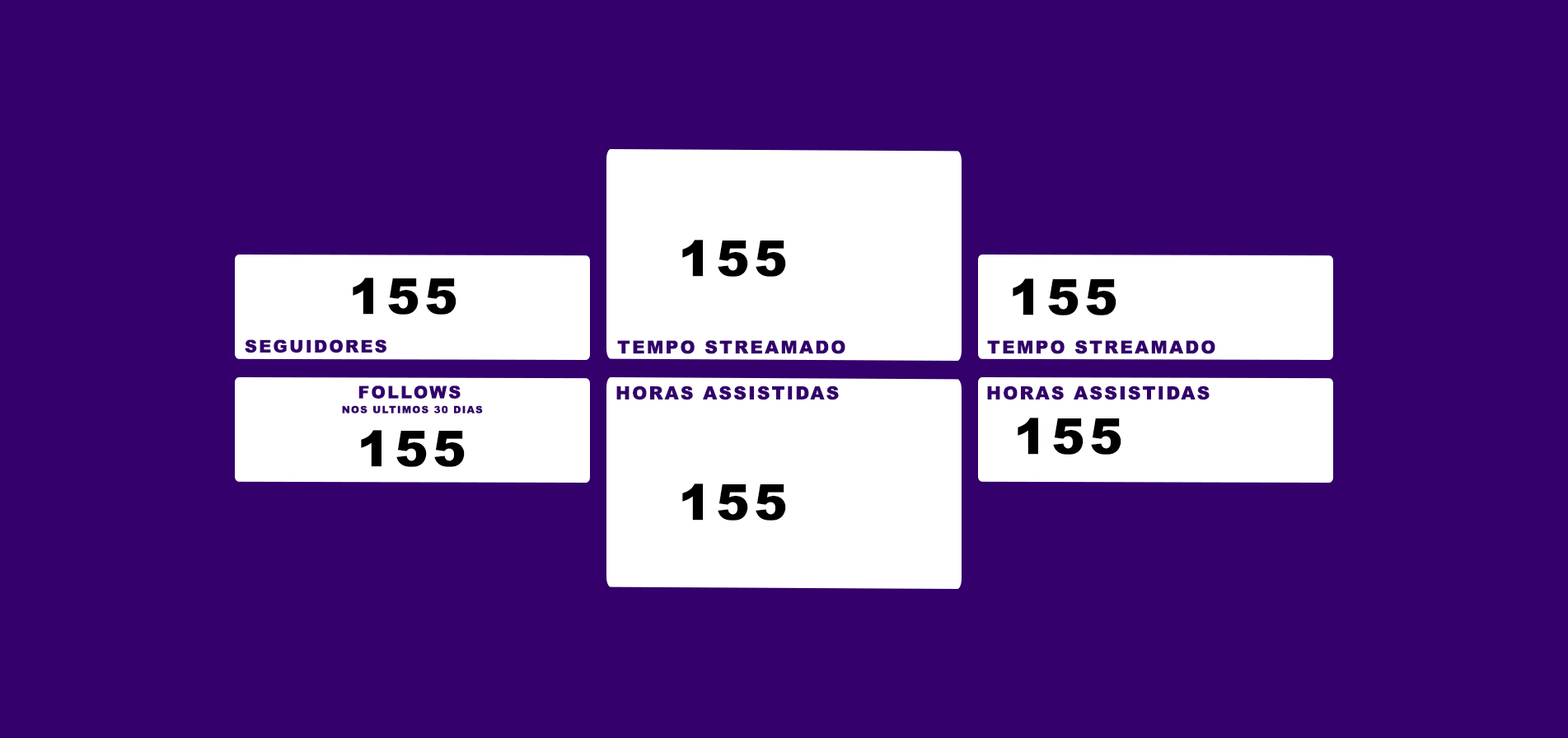
<style>
.page{position:relative;width:1568px;height:738px;background:#33006c}
.page>*{position:absolute;margin:0}
.t1{font:49.4px "Arial-Black";letter-spacing:0.1em;color:#000000;text-transform:uppercase}
.t2{font:17.3px "Arial-Black";letter-spacing:0.1em;color:#33006c;text-transform:uppercase}
.t3{font:18px "Arial-Black";letter-spacing:0.1em;color:#33006c;text-transform:uppercase}
.t4{font:9.9px/14.8px "Arial-Black";letter-spacing:0.1em;color:#33006c;text-transform:uppercase}
.t5{font:17.3px/14.8px "Arial-Black";letter-spacing:0.1em;color:#33006c;text-transform:uppercase}
</style>
<div class="page">
<p class="t1" style="left:682px;top:240px;width:104px;height:37px">155</p>
<p class="t1" style="left:353px;top:278px;width:103px;height:37px">155</p>
<p class="t1" style="left:1013px;top:278px;width:103px;height:38px">155</p>
<p class="t2" style="left:245px;top:339px;width:141px;height:14px">SEGUIDORES</p>
<p class="t3" style="left:617px;top:340px;width:228px;height:14px">tempo streamado</p>
<p class="t3" style="left:987px;top:340px;width:228px;height:14px">tempo streamado</p>
<p class="t4" style="left:342px;top:386px;width:141px;height:28px;text-align:center"><span class="t5">follows <br></span>nos ultimos 30 dias</p>
<p class="t3" style="left:616px;top:386px;width:223px;height:14px">horas assistidas</p>
<p class="t3" style="left:987px;top:386px;width:223px;height:14px">horas assistidas</p>
<p class="t1" style="left:1018px;top:418px;width:103px;height:37px">155</p>
<p class="t1" style="left:361px;top:430px;width:104px;height:37px">155</p>
<p class="t1" style="left:682px;top:484px;width:104px;height:37px">155</p>
</div>
